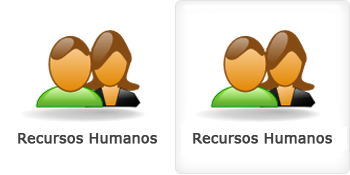
<style>
.page{position:relative;width:350px;height:175px;background:#ffffff}
.page>*{position:absolute;margin:0}
.t1{font:14px "Verdana";color:#404040;font-weight:bold}
</style>
<div class="page">
<p class="t1" style="left:18px;top:133px;width:139px;height:11px">Recursos Humanos</p>
<p class="t1" style="left:193px;top:133px;width:139px;height:11px">Recursos Humanos</p>
</div>
